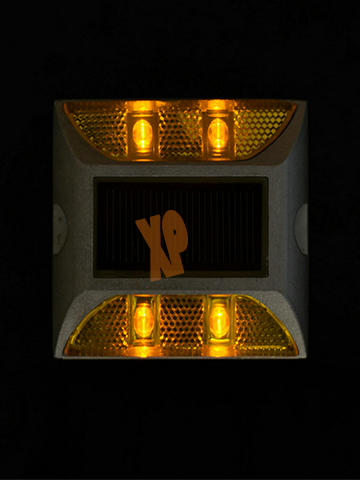
<style>
.page{position:relative;width:360px;height:480px}
.page>*{position:absolute;margin:0}
.t1{font:90.4px "Bauhaus93";letter-spacing:-0.05em;color:#623004;font-weight:bold;scale:0.49 1}
</style>
<div class="page">
<p class="t1" style="left:135px;top:210px;width:53px;height:72px;rotate:-15deg">XP</p>
</div>
